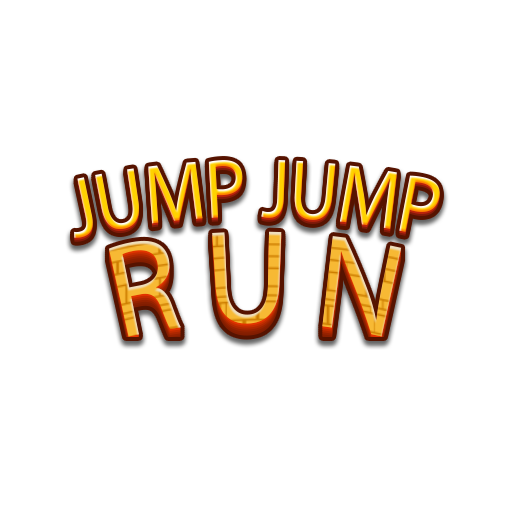
<style>
.page{position:relative;width:512px;height:512px;background:#ffffff}
.page>*{position:absolute;margin:0}
.t1{font:85px "MyriadPro-Regular";scale:0.83 1}
.t2{font:135px "MyriadPro-Regular";scale:0.83 1}
</style>
<div class="page">
<p class="t1" style="left:74px;top:160px;width:366px;height:78px">JUMP JUMP</p>
<p class="t2" style="left:108px;top:231px;width:294px;height:106px">R U N</p>
</div>
